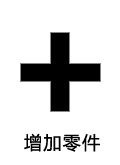
<style>
.page{position:relative;width:120px;height:165px;background:#ffffff}
.page>*{position:absolute;margin:0}
.t1{font:18px "MicrosoftYaHei";letter-spacing:0.075em;color:#000000}
</style>
<div class="page">
<p class="t1" style="left:24px;top:133px;width:76px;height:19px">增加零件</p>
</div>
